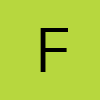
<style>
.page{position:relative;width:100px;height:100px;background:#b7d73e}
.page>*{position:absolute;margin:0}
.t1{font:62.5px "Muli-Regular";color:#000000}
</style>
<div class="page">
<p class="t1" style="left:40px;top:28px;width:28px;height:44px">F</p>
</div>
